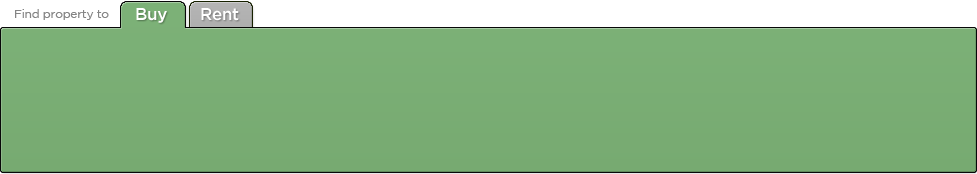
<style>
.page{position:relative;width:977px;height:174px}
.page>*{position:absolute;margin:0}
.t1{font:12px "GothamBook";letter-spacing:-0.02em;color:#858585}
.t2{font:17px "GothamMedium";letter-spacing:-0.02em;color:#ffffff}
</style>
<div class="page">
<p class="t1" style="left:15px;top:9px;width:94px;height:11px">Find property to</p>
<p class="t2" style="left:136px;top:8px;width:31px;height:15px">Buy</p>
<p class="t2" style="left:201px;top:8px;width:38px;height:13px">Rent</p>
</div>
